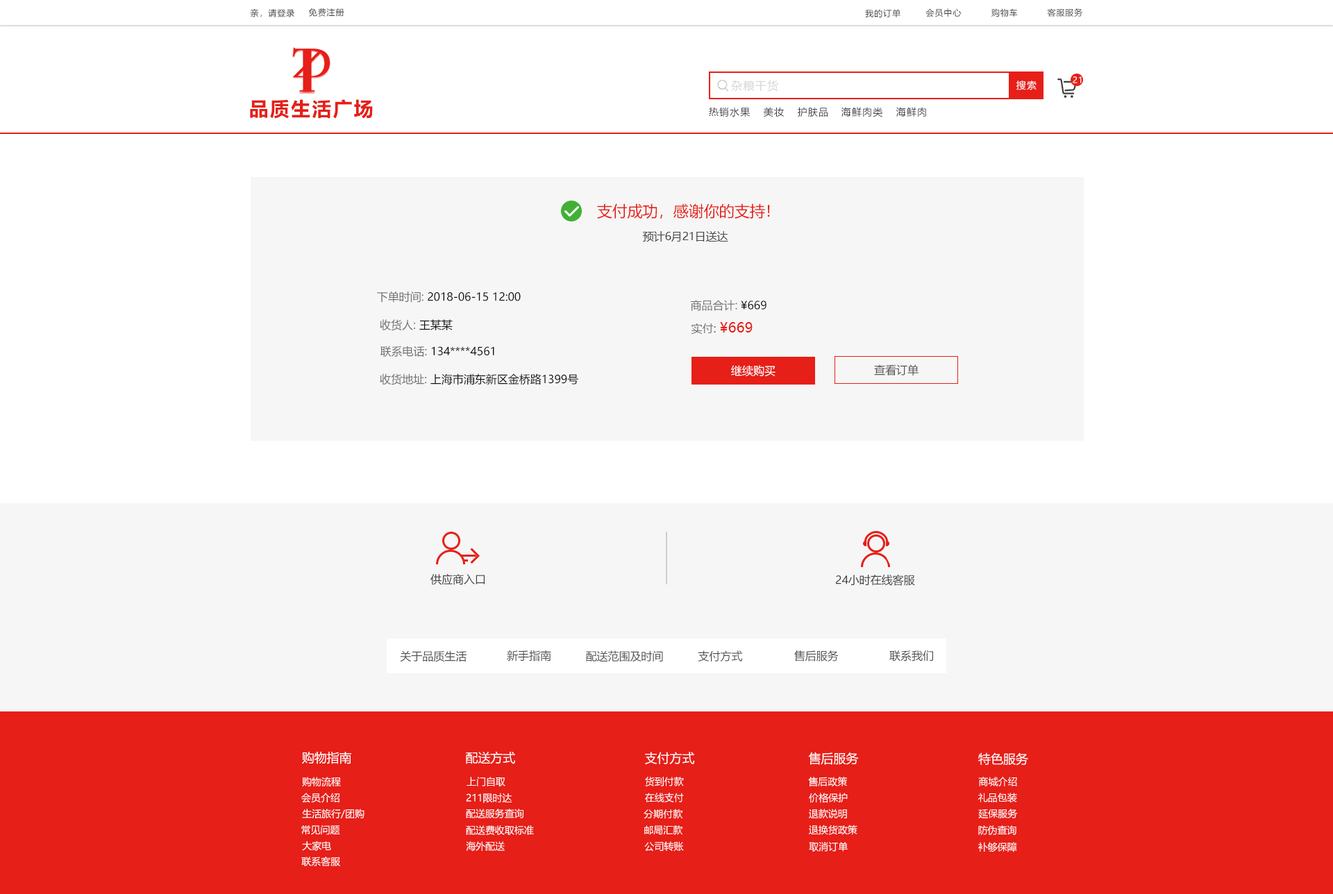
<style>
.page{position:relative;width:1333px;height:894px;background:#f6f6f6}
.page>*{position:absolute;margin:0}
.t1{font:8.3px "MicrosoftYaHei";letter-spacing:0.08em;color:#404040}
.t2{font:8.3px "MicrosoftYaHei";letter-spacing:0.08em;color:#ffffff}
.t3{font:11.1px "MicrosoftYaHei";letter-spacing:0.08em;color:#d6d6d6}
.t4{font:9.7px "MicrosoftYaHei";letter-spacing:0.08em;color:#ffffff}
.t5{font:19.4px "MicrosoftYaHei-Bold";letter-spacing:0.08em;color:#e61f18}
.t6{font:9.7px "MicrosoftYaHei";letter-spacing:0.08em;color:#404040}
.t7{font:15.3px "MicrosoftYaHei";color:#e61f18}
.t8{font:11.1px "MicrosoftYaHei";color:#474747}
.t9{font:11.1px "MicrosoftYaHei";color:#101010}
.t10{font:11.1px "MicrosoftYaHei";color:#717171}
.t11{font:13.9px "MicrosoftYaHei";color:#e61f18}
.t12{font:11.1px "MicrosoftYaHei";color:#ffffff}
.t13{font:11.1px "MicrosoftYaHei";color:#515151}
.t14{font:11.1px "MicrosoftYaHei";color:#404040}
.t15{font:11.1px "MicrosoftYaHei";color:#505050}
.t16{font:12.5px "MicrosoftYaHei";color:#ffffff}
.t17{font:9.7px "MicrosoftYaHei";color:#ffffff}
</style>
<div class="page">
<p class="t1" style="left:250px;top:8px;width:44px;height:9px">亲，请登录</p>
<p class="t1" style="left:308px;top:8px;width:36px;height:9px">免费注册</p>
<p class="t1" style="left:865px;top:9px;width:36px;height:8px">我的订单</p>
<p class="t1" style="left:926px;top:8px;width:36px;height:9px">会员中心</p>
<p class="t1" style="left:992px;top:8px;width:26px;height:9px">购物车</p>
<p class="t1" style="left:1047px;top:8px;width:36px;height:9px">客服服务</p>
<p class="t2" style="left:1073px;top:76px;width:9px;height:7px">21</p>
<p class="t3" style="left:731px;top:80px;width:47px;height:12px">杂粮干货</p>
<p class="t4" style="left:1017px;top:81px;width:20px;height:9px">搜索</p>
<p class="t5" style="left:250px;top:99px;width:123px;height:20px">品质生活广场</p>
<p class="t6" style="left:709px;top:107px;width:42px;height:10px">热销水果</p>
<p class="t6" style="left:764px;top:107px;width:20px;height:10px">美妆</p>
<p class="t6" style="left:798px;top:107px;width:30px;height:10px">护肤品</p>
<p class="t6" style="left:841px;top:107px;width:42px;height:10px">海鲜肉类</p>
<p class="t6" style="left:896px;top:107px;width:30px;height:10px">海鲜肉</p>
<p class="t7" style="left:597px;top:203px;width:173px;height:16px">支付成功，感谢你的支持！</p>
<p class="t8" style="left:642px;top:231px;width:86px;height:11px">预计6月21日送达</p>
<p class="t9" style="left:377px;top:291px;width:144px;height:12px"><span class="t10">下单时间: </span>2018-06-15 12:00</p>
<p class="t10" style="left:690px;top:300px;width:77px;height:11px">商品合计: <span class="t9">¥669</span></p>
<p class="t10" style="left:380px;top:319px;width:73px;height:12px">收货人: <span class="t9">王某某</span></p>
<p class="t11" style="left:692px;top:322px;width:61px;height:12px"><span class="t10">实付: </span>¥669</p>
<p class="t9" style="left:380px;top:346px;width:114px;height:11px"><span class="t10">联系电话: </span>134****4561</p>
<p class="t12" style="left:731px;top:365px;width:45px;height:11px">继续购买</p>
<p class="t13" style="left:874px;top:365px;width:45px;height:11px">查看订单</p>
<p class="t9" style="left:380px;top:374px;width:198px;height:11px"><span class="t10">收货地址: </span>上海市浦东新区金桥路1399号</p>
<p class="t14" style="left:431px;top:574px;width:54px;height:11px">供应商入口</p>
<p class="t14" style="left:836px;top:574px;width:79px;height:12px">24小时在线客服</p>
<p class="t15" style="left:400px;top:651px;width:67px;height:11px">关于品质生活</p>
<p class="t15" style="left:507px;top:650px;width:44px;height:12px">新手指南</p>
<p class="t15" style="left:586px;top:651px;width:77px;height:11px">配送范围及时间</p>
<p class="t15" style="left:698px;top:651px;width:45px;height:11px">支付方式</p>
<p class="t15" style="left:794px;top:651px;width:45px;height:11px">售后服务</p>
<p class="t15" style="left:890px;top:651px;width:43px;height:11px">联系我们</p>
<p class="t16" style="left:302px;top:752px;width:49px;height:13px">购物指南</p>
<p class="t16" style="left:466px;top:752px;width:49px;height:13px">配送方式</p>
<p class="t16" style="left:645px;top:752px;width:50px;height:13px">支付方式</p>
<p class="t16" style="left:808px;top:752px;width:51px;height:13px">售后服务</p>
<p class="t16" style="left:978px;top:753px;width:50px;height:13px">特色服务</p>
<p class="t17" style="left:302px;top:777px;width:39px;height:10px">购物流程</p>
<p class="t17" style="left:467px;top:777px;width:39px;height:10px">上门自取</p>
<p class="t17" style="left:645px;top:777px;width:39px;height:10px">货到付款</p>
<p class="t17" style="left:808px;top:777px;width:39px;height:10px">售后政策</p>
<p class="t17" style="left:978px;top:777px;width:39px;height:10px">商城介绍</p>
<p class="t17" style="left:301px;top:793px;width:39px;height:10px">会员介绍</p>
<p class="t17" style="left:466px;top:793px;width:46px;height:10px">211限时达</p>
<p class="t17" style="left:645px;top:793px;width:39px;height:10px">在线支付</p>
<p class="t17" style="left:809px;top:793px;width:39px;height:10px">价格保护</p>
<p class="t17" style="left:978px;top:793px;width:39px;height:10px">礼品包装</p>
<p class="t17" style="left:302px;top:809px;width:63px;height:10px">生活旅行/团购</p>
<p class="t17" style="left:466px;top:809px;width:58px;height:10px">配送服务查询</p>
<p class="t17" style="left:644px;top:809px;width:39px;height:10px">分期付款</p>
<p class="t17" style="left:809px;top:809px;width:38px;height:10px">退款说明</p>
<p class="t17" style="left:978px;top:809px;width:40px;height:10px">延保服务</p>
<p class="t17" style="left:301px;top:826px;width:39px;height:9px">常见问题</p>
<p class="t17" style="left:466px;top:826px;width:68px;height:9px">配送费收取标准</p>
<p class="t17" style="left:644px;top:826px;width:39px;height:9px">邮局汇款</p>
<p class="t17" style="left:809px;top:825px;width:49px;height:10px">退换货政策</p>
<p class="t17" style="left:978px;top:826px;width:39px;height:9px">防伪查询</p>
<p class="t17" style="left:302px;top:841px;width:29px;height:10px">大家电</p>
<p class="t17" style="left:466px;top:842px;width:39px;height:9px">海外配送</p>
<p class="t17" style="left:644px;top:842px;width:40px;height:10px">公司转账</p>
<p class="t17" style="left:809px;top:842px;width:39px;height:10px">取消订单</p>
<p class="t17" style="left:978px;top:842px;width:39px;height:11px">补够保障</p>
<p class="t17" style="left:301px;top:857px;width:39px;height:10px">联系客服</p>
</div>
